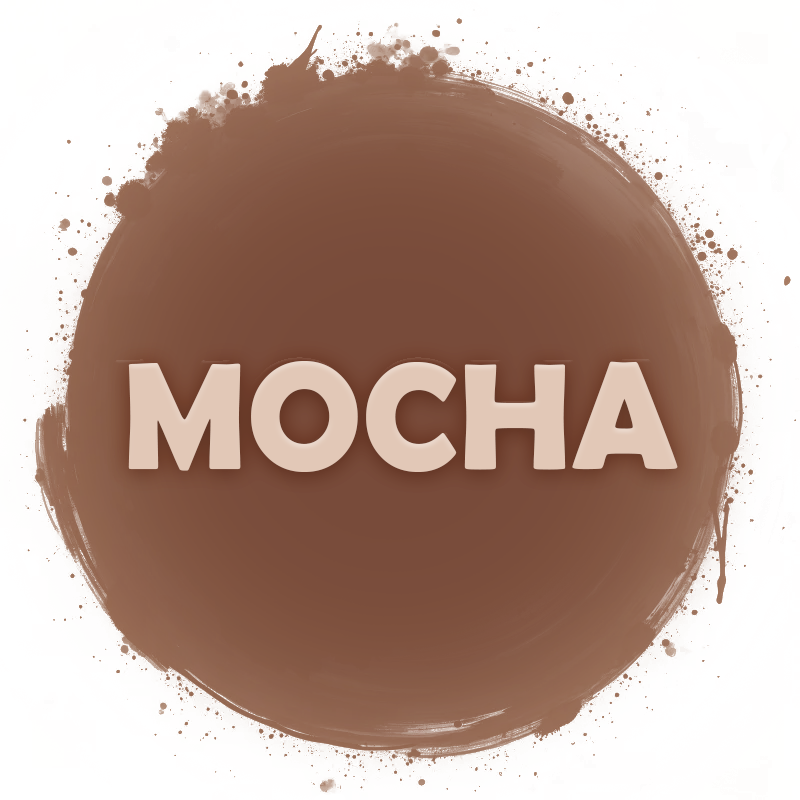
<style>
.page{position:relative;width:800px;height:800px}
.page>*{position:absolute;margin:0}
.t1{font:131.7px "BerlinSansFBDemi-Bold";color:#e2c8b7}
</style>
<div class="page">
<p class="t1" style="left:128px;top:361px;width:550px;height:111px">MOCHA</p>
</div>
